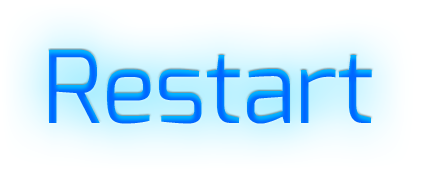
<style>
.page{position:relative;width:422px;height:174px}
.page>*{position:absolute;margin:0}
.t1{font:100px "Exo-Regular";color:#007aff}
</style>
<div class="page">
<p class="t1" style="left:49px;top:49px;width:323px;height:75px">Restart</p>
</div>
